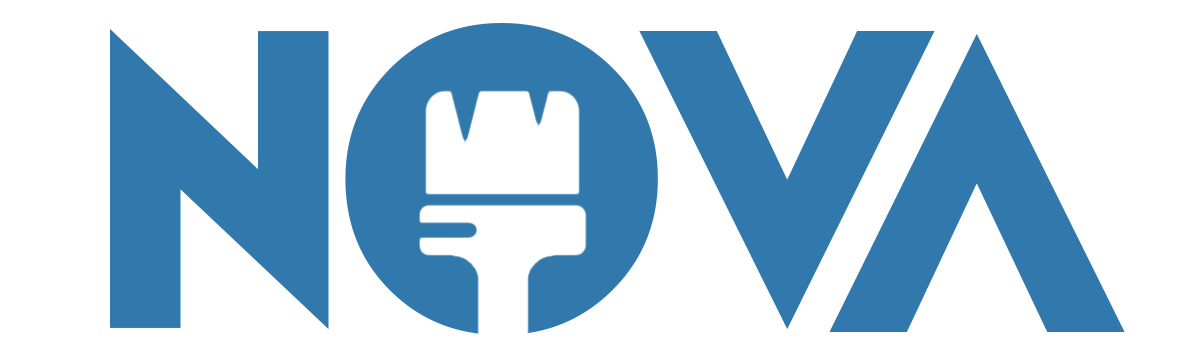
<style>
.page{position:relative;width:1181px;height:363px;background:#ffffff}
.page>*{position:absolute;margin:0}
.t1{font:525.9px "NovaSOLID-SOLID";letter-spacing:0.07em;color:#3179ac;text-transform:uppercase}
.t2{font:525.9px "NovaSOLID-SOLID";color:#3179ac;text-transform:uppercase}
</style>
<div class="page">
<p class="t1" style="left:110px;top:23px;width:825px;height:312px">nov</p>
<p class="t2" style="left:829px;top:34px;width:296px;height:298px;rotate:180deg">v</p>
</div>
